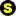
<style>
.page{position:relative;width:16px;height:16px;background:#000000}
.page>*{position:absolute;margin:0}
.t1{font:13px "Arial-Black";color:#ffff00}
</style>
<div class="page">
<p class="t1" style="left:3px;top:3px;width:9px;height:10px">S</p>
</div>
